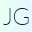
<style>
.page{position:relative;width:32px;height:32px}
.page>*{position:absolute;margin:0}
.t1{font:24px "Lato-Thin";color:#032937}
</style>
<div class="page">
<p class="t1" style="left:3px;top:8px;width:26px;height:17px">JG</p>
</div>
